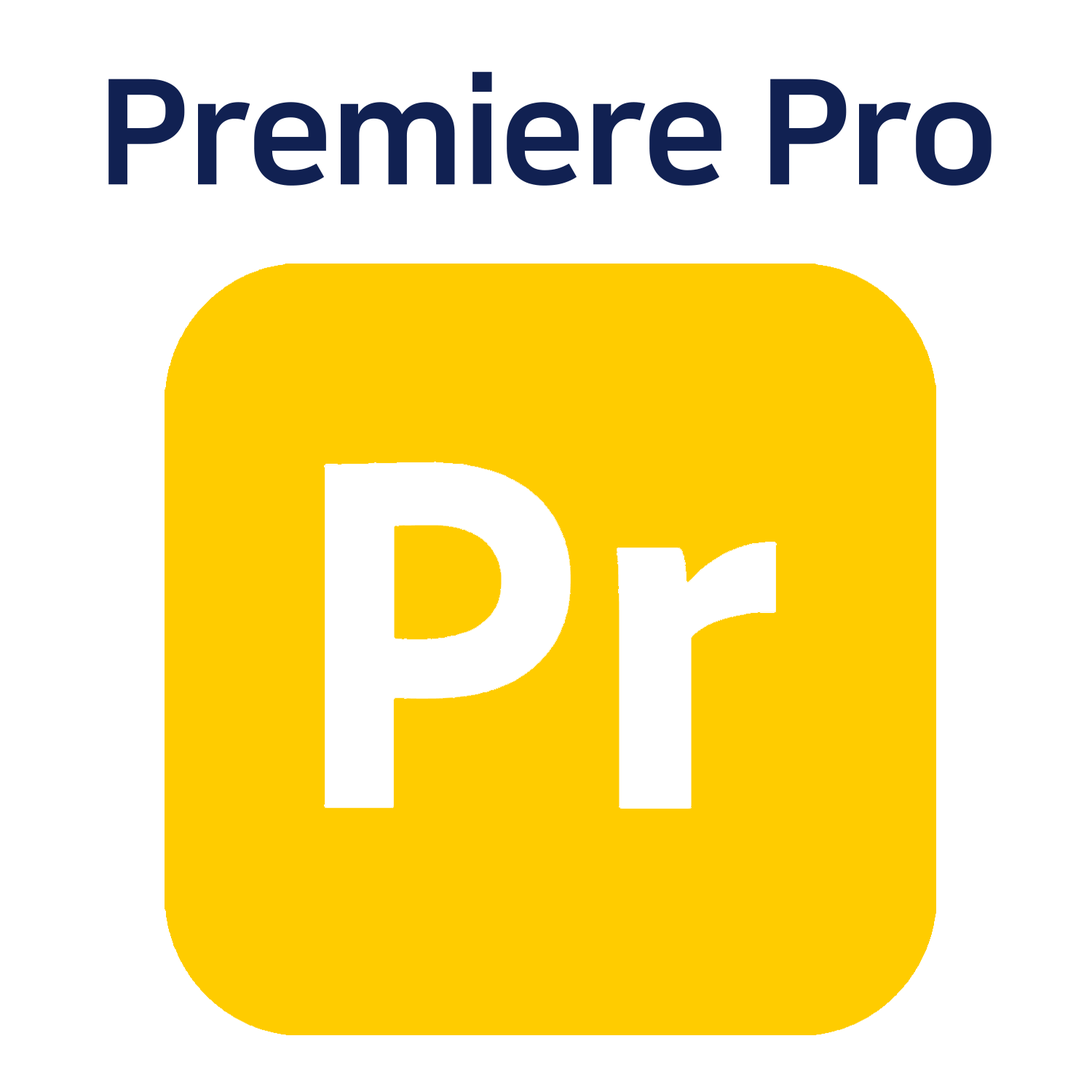
<style>
.page{position:relative;width:1092px;height:1092px;background:#ffffff}
.page>*{position:absolute;margin:0}
.t1{font:145.9px "NanumSquareEB";letter-spacing:-0.02em;color:#112152}
</style>
<div class="page">
<p class="t1" style="left:108px;top:71px;width:884px;height:115px">Premiere Pro</p>
</div>
